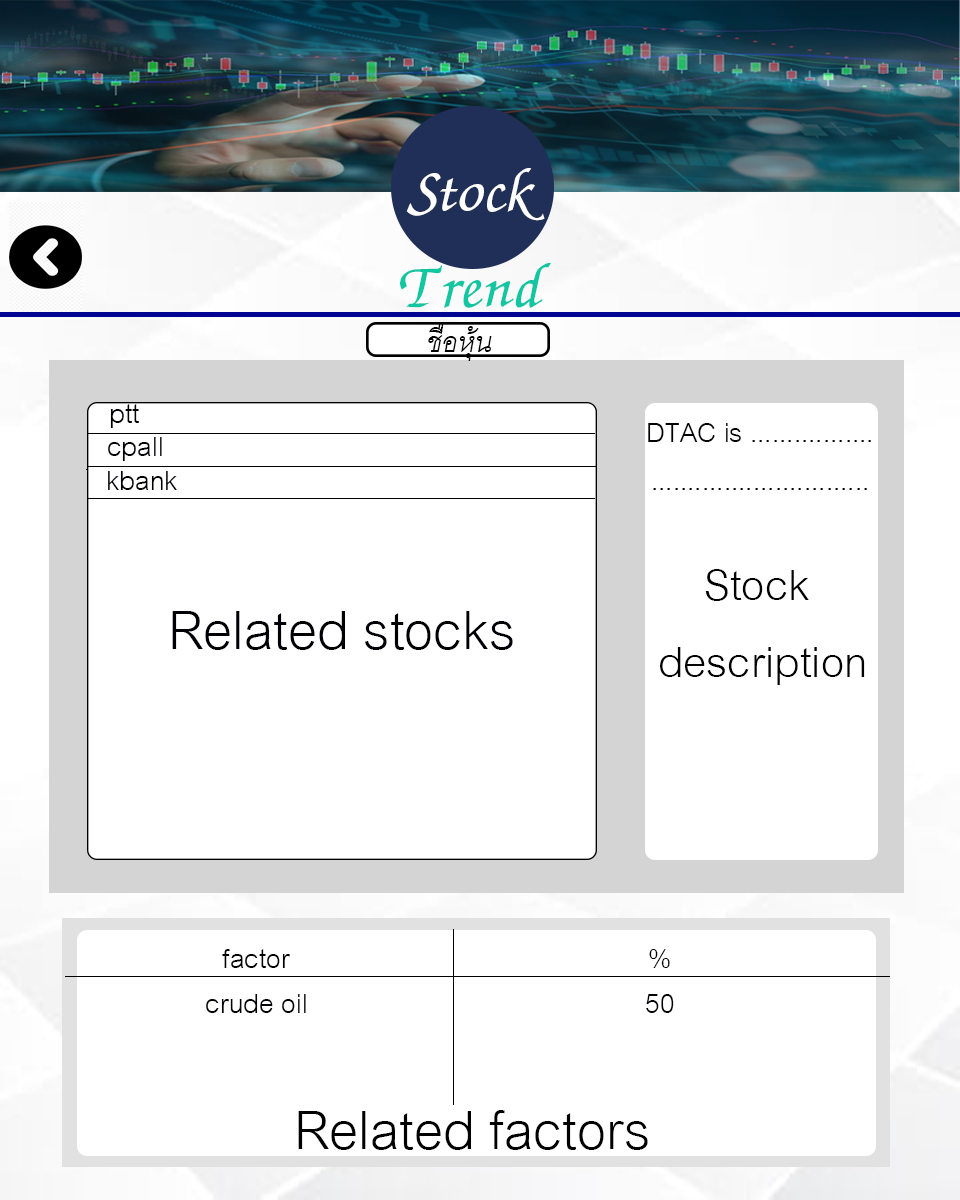
<style>
.page{position:relative;width:960px;height:1200px;background:#ffffff}
.page>*{position:absolute;margin:0}
.t1{font:80px "JSWansika-Italic";color:#ffffff}
.t2{font:80px "JSWansika-Italic";color:#13c6a2}
.t3{font:40px "CordiaNew-Italic";color:#000000}
.t4{font:40px "CordiaNew";color:#000004}
.t5{font:64px "CordiaNew";color:#000000}
.t6{font:80px "CordiaNew";color:#000004}
.t7{font:40px "CordiaNew";color:#000000}
.t8{font:80px "CordiaNew";color:#000000}
</style>
<div class="page">
<p class="t1" style="left:400px;top:168px;width:151px;height:140px;text-align:center">Stock<br><span class="t2">Trend</span></p>
<p class="t3" style="left:428px;top:324px;width:64px;height:37px">ชื่อหุ้น</p>
<p class="t4" style="left:110px;top:404px;width:29px;height:24px">ptt</p>
<p class="t4" style="left:648px;top:423px;width:223px;height:67px;text-align:center">DTAC is .................<br>..............................</p>
<p class="t4" style="left:108px;top:437px;width:54px;height:24px">cpall</p>
<p class="t4" style="left:108px;top:471px;width:69px;height:19px">kbank</p>
<p class="t5" style="left:660px;top:569px;width:205px;height:116px;text-align:center">Stock <br>description</p>
<p class="t6" style="left:172px;top:611px;width:341px;height:39px">Related stocks</p>
<p class="t7" style="left:222px;top:949px;width:68px;height:19px">factor</p>
<p class="t7" style="left:649px;top:949px;width:21px;height:19px">%</p>
<p class="t4" style="left:206px;top:994px;width:100px;height:19px">crude oil</p>
<p class="t4" style="left:646px;top:994px;width:28px;height:19px">50</p>
<p class="t8" style="left:298px;top:1110px;width:350px;height:40px">Related factors</p>
</div>
